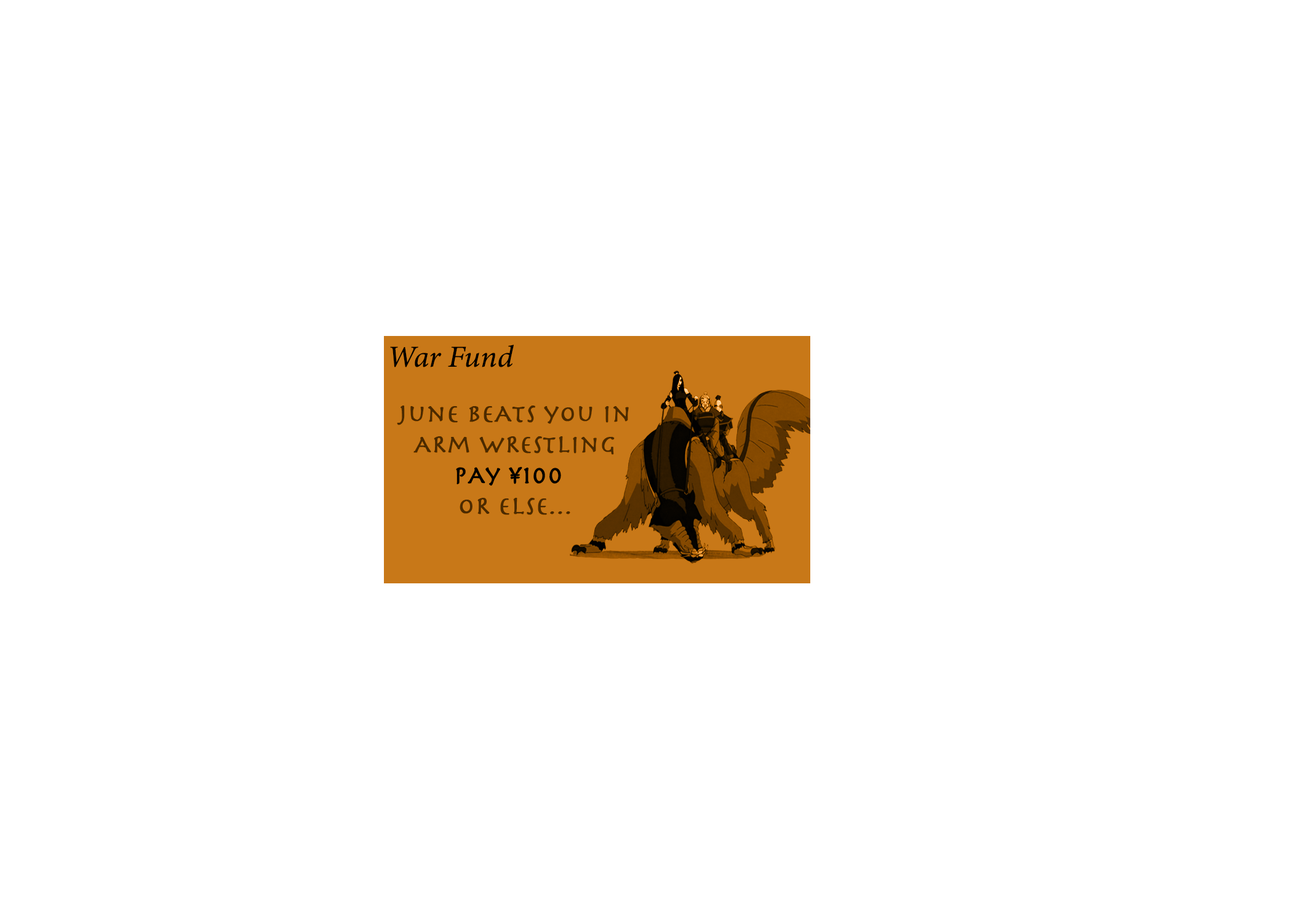
<style>
.page{position:relative;width:1292px;height:923px;background:#ffffff}
.page>*{position:absolute;margin:0}
.t1{font:30.8px "MinionConceptItalic-MediumItalic";color:#000000;font-weight:bold}
.t2{font:25.6px "Herculanum";color:#4d310e;font-weight:bold}
.t3{font:25.6px "Herculanum";color:#000000;font-weight:bold}
</style>
<div class="page">
<p class="t1" style="left:390px;top:345px;width:124px;height:22px">War Fund</p>
<p class="t2" style="left:397px;top:405px;width:232px;height:110px;text-align:center">june beAts you in<br>ARm wRestling<br> <br>oR else...</p>
<p class="t3" style="left:456px;top:466px;width:105px;height:20px"><span class="t2"> <br> <br></span>PAy ¥100</p>
</div>
